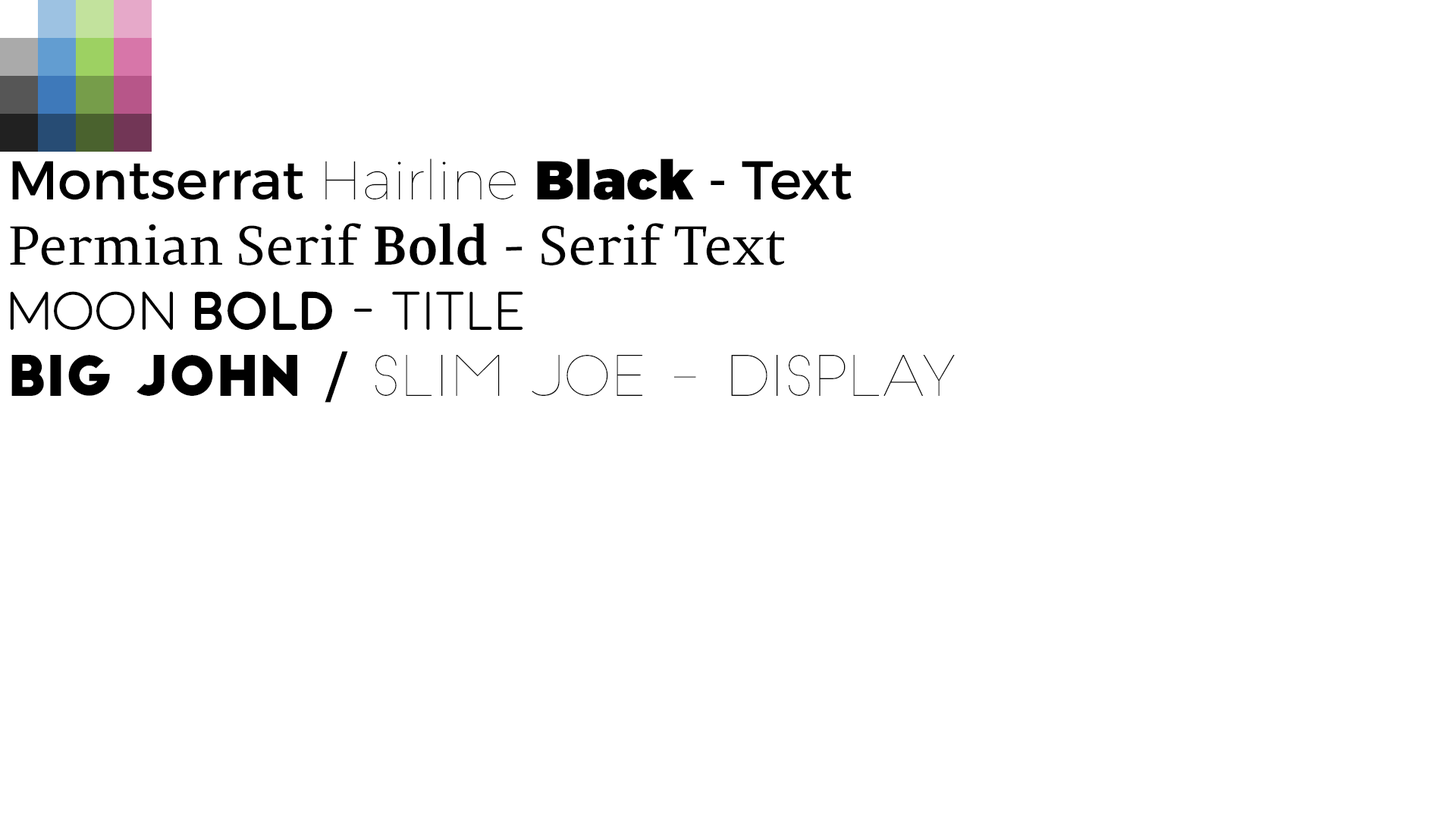
<style>
.page{position:relative;width:1456px;height:819px;background:#ffffff}
.page>*{position:absolute;margin:0}
.t1{font:54.6px "SlimJoe";color:#000000}
.t2{font:54.6px "Montserrat-Regular";color:#000000}
.t3{font:54.6px "Montserrat-Hairline";color:#000000}
.t4{font:54.6px "Montserrat-Black";color:#000000}
.t5{font:54.6px "PermianSerifTypeface";color:#000000}
.t6{font:54.6px "PermianSerifTypeface-Bold";color:#000000}
.t7{font:54.6px "Moon-Light";color:#000000}
.t8{font:54.6px "Moon-Bold";color:#000000}
.t9{font:54.6px "BigJohn";color:#000000}
</style>
<div class="page">
<p class="t1" style="left:10px;top:158px;width:945px;height:245px"><span class="t2">Montserrat </span><span class="t3">Hairline </span><span class="t4">Black</span><span class="t2"> - Text<br></span><span class="t5">Permian Serif </span><span class="t6">Bold </span><span class="t5">- Serif Text<br></span><span class="t7">MOON </span><span class="t8">BOLD </span><span class="t7">- Title<br></span><span class="t9">big john </span><span class="t2">/</span> SLIm Joe - display</p>
</div>
